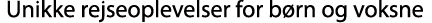
<style>
.page{position:relative;width:432px;height:23px;background:#ffffff}
.page>*{position:absolute;margin:0}
.t1{font:24px "MyriadPro-Regular";color:#000000}
</style>
<div class="page">
<p class="t1" style="left:7px;top:0px;width:416px;height:23px">Unikke rejseoplevelser for børn og voksne</p>
</div>
